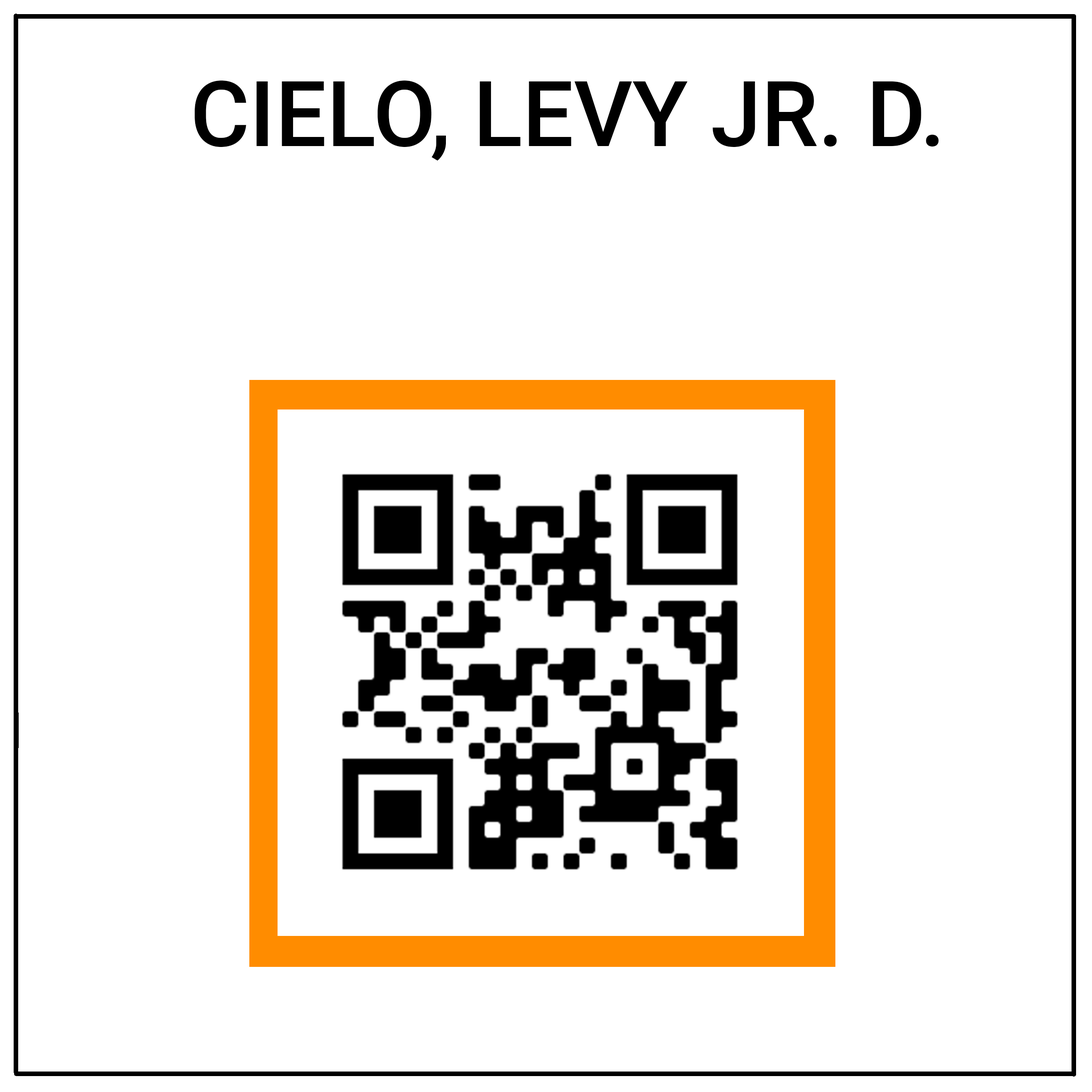
<style>
.page{position:relative;width:1092px;height:1092px;background:#ffffff}
.page>*{position:absolute;margin:0}
.t1{font:91px "Roboto-Medium";color:#000000}
</style>
<div class="page">
<p class="t1" style="left:194px;top:80px;width:745px;height:81px">CIELO, LEVY JR. D.</p>
</div>
